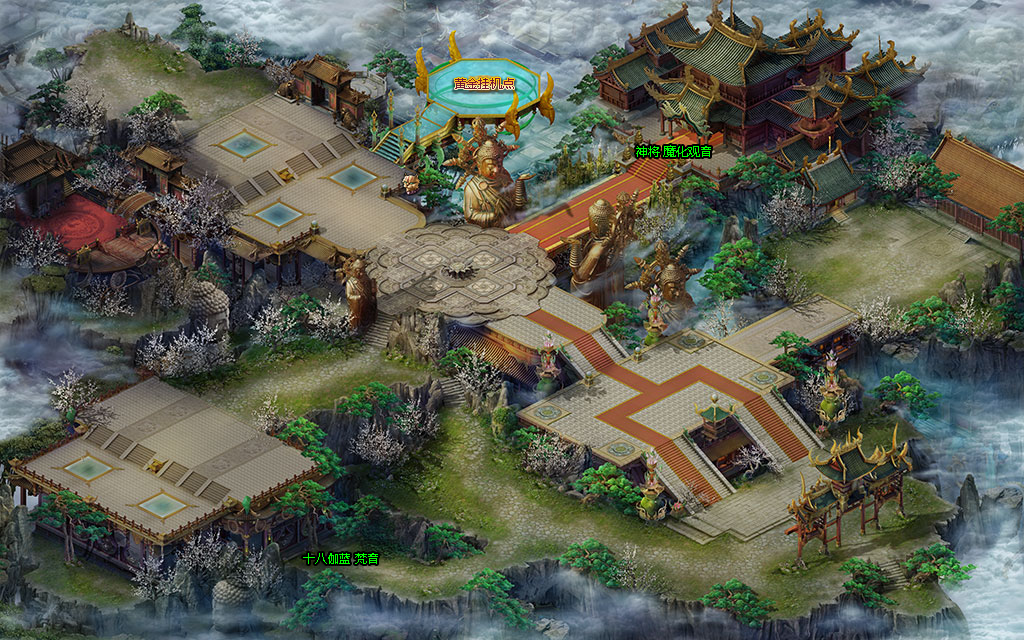
<style>
.page{position:relative;width:1024px;height:640px}
.page>*{position:absolute;margin:0}
.t1{font:12px "MicrosoftYaHei";color:#701633}
.t2{font:12px "MicrosoftYaHei";color:#00ff00}
</style>
<div class="page">
<p class="t1" style="left:455px;top:78px;width:59px;height:11px">黄金挂机点</p>
<p class="t2" style="left:636px;top:145px;width:75px;height:12px">神将 魔化观音</p>
<p class="t2" style="left:303px;top:553px;width:75px;height:11px">十八伽蓝 梵音</p>
</div>
